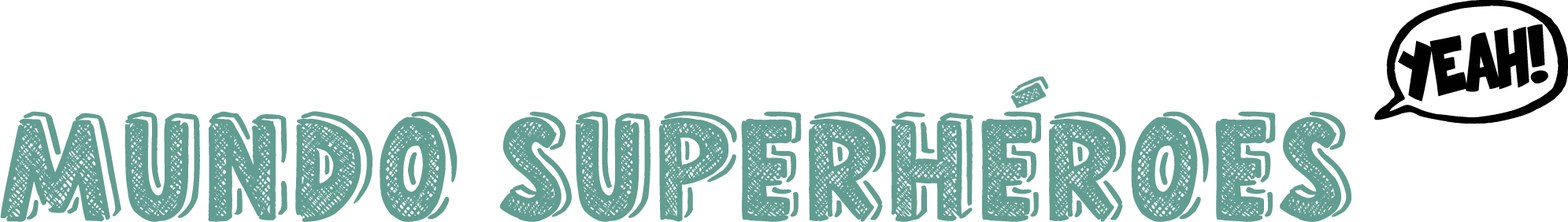
<style>
.page{position:relative;width:1568px;height:222px;background:#ffffff}
.page>*{position:absolute;margin:0}
.t1{font:94.5px "ComixLoud";color:#010101}
.t2{font:157.5px "HomeSchool";color:#629d91}
</style>
<div class="page">
<p class="t1" style="left:1374px;top:0px;width:195px;height:124px">*</p>
<p class="t2" style="left:0px;top:111px;width:1351px;height:111px">MUNDO SUPERHeROES</p>
</div>
